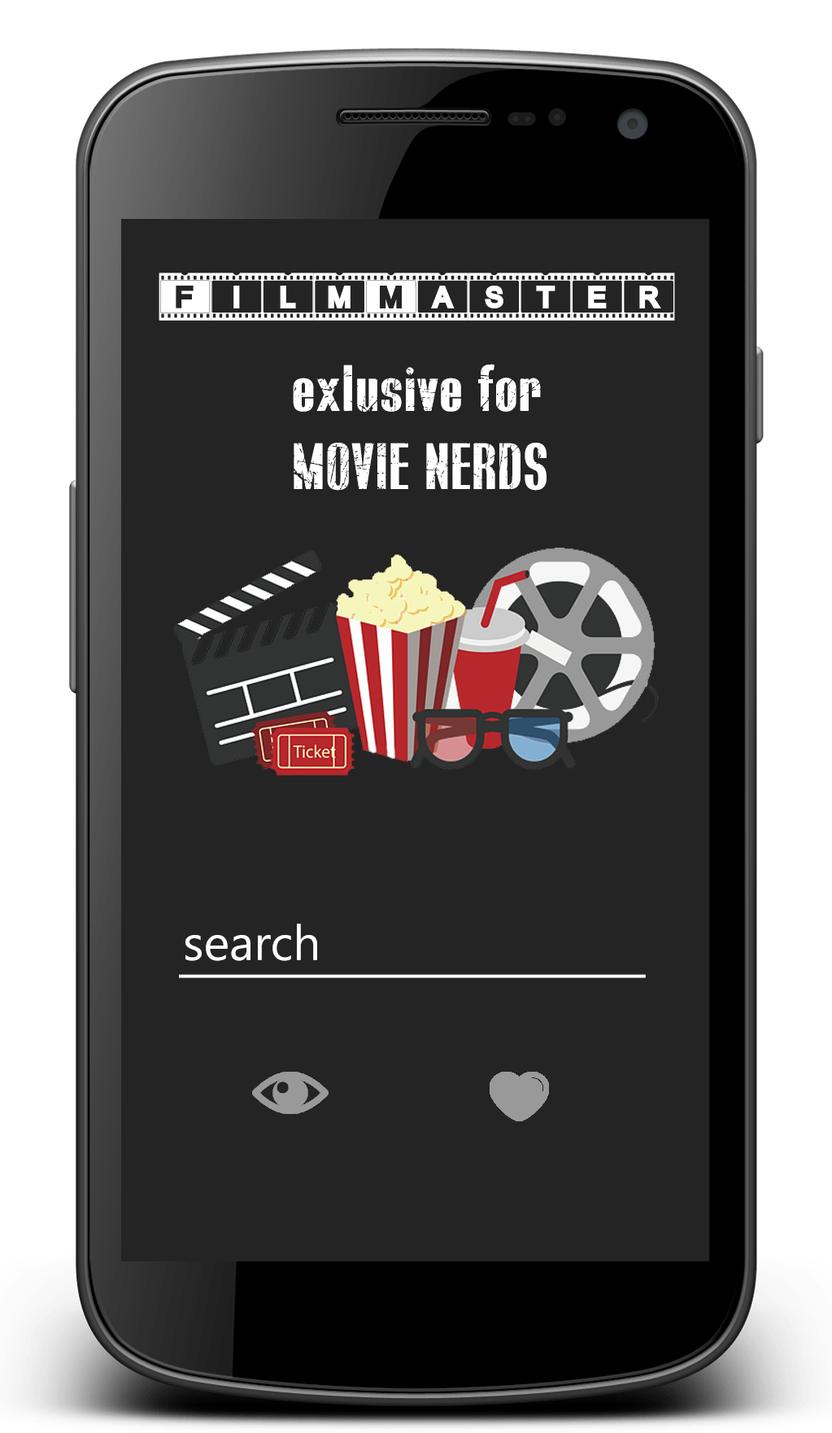
<style>
.page{position:relative;width:832px;height:1433px;background:#242424}
.page>*{position:absolute;margin:0}
.t1{font:65.1px "ACFilmstrip";color:#ffffff}
.t2{font:65.1px "BLUEFISHSCRATCHEDDemo";color:#ffffff}
.t3{font:48.8px "LeelawadeeUI";color:#ffffff}
.t4{font:48.8px "MS Sans Serif";color:#ffffff}
</style>
<div class="page">
<p class="t1" style="left:159px;top:273px;width:516px;height:48px">FilmMaster</p>
<p class="t2" style="left:293px;top:364px;width:254px;height:127px">exlusive for <br>MOVIE NERDS</p>
<p class="t3" style="left:185px;top:923px;width:132px;height:38px">search</p>
<p class="t4" style="left:179px;top:974px;width:467px;height:4px">_________________</p>
</div>
